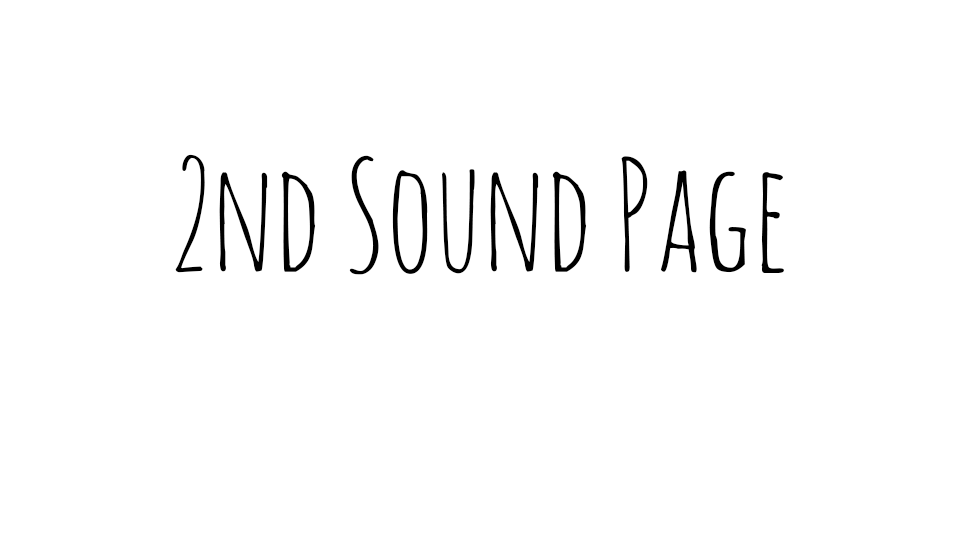
<style>
.page{position:relative;width:960px;height:540px;background:#ffffff}
.page>*{position:absolute;margin:0}
.t1{font:150px "AmaticSC-Regular";color:#000000}
</style>
<div class="page">
<p class="t1" style="left:175px;top:154px;width:609px;height:121px">2nd Sound Page</p>
</div>
